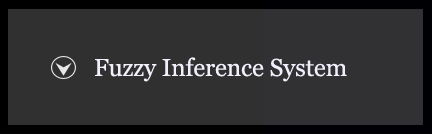
<style>
.page{position:relative;width:432px;height:134px;background:#313030}
.page>*{position:absolute;margin:0}
.t1{font:24.5px "Georgia";letter-spacing:-0.005em;color:#f0effb}
</style>
<div class="page">
<p class="t1" style="left:95px;top:57px;width:252px;height:25px">Fuzzy Inference System</p>
</div>
